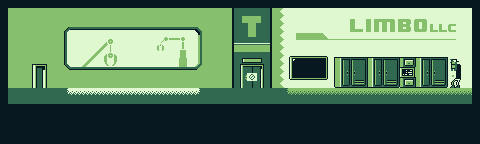
<style>
.page{position:relative;width:480px;height:144px;background:#071821}
.page>*{position:absolute;margin:0}
.t1{font:33px "PolenoBold";color:#86c06c;text-transform:uppercase}
.t2{font:16px "8BITWONDERNominal";color:#86c06c;text-transform:uppercase}
.t3{font:9px "8BITWONDERNominal";color:#86c06c;text-transform:uppercase}
</style>
<div class="page">
<p class="t1" style="left:242px;top:16px;width:19px;height:21px">t</p>
<p class="t2" style="left:350px;top:19px;width:106px;height:13px">limbo<span class="t3">llc</span></p>
</div>
